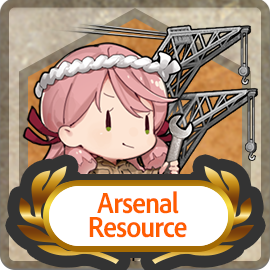
<style>
.page{position:relative;width:270px;height:270px}
.page>*{position:absolute;margin:0}
.t1{font:30px/24px "AdobeClean-Bold";letter-spacing:-0.04em;color:#ff5d00;scale:0.9 1}
</style>
<div class="page">
<p class="t1" style="left:89px;top:191px;width:98px;height:47px;text-align:center">Arsenal<br>Resource</p>
</div>
